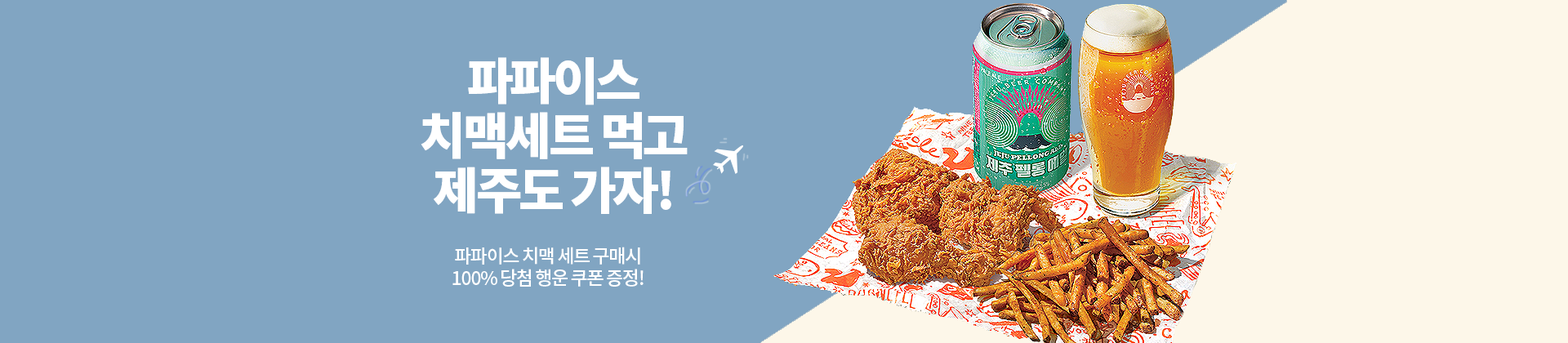
<style>
.page{position:relative;width:1568px;height:343px;background:#81a5c2}
.page>*{position:absolute;margin:0}
.t1{font:49.8px/54.7px "NotoSansKR-Black";letter-spacing:-0.06em;color:#ffffff}
.t2{font:18.8px/22.1px "NotoSansKR-Medium";letter-spacing:-0.06em;color:#ffffff}
</style>
<div class="page">
<p class="t1" style="left:421px;top:57px;width:267px;height:157px;text-align:center">파파이스<br>치맥세트 먹고<br>제주도 가자!</p>
<p class="t2" style="left:452px;top:247px;width:192px;height:40px;text-align:center">파파이스 치맥 세트 구매시<br>100% 당첨 행운 쿠폰 증정!</p>
</div>
